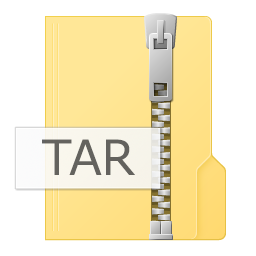
<style>
.page{position:relative;width:256px;height:256px;background:#ffffff}
.page>*{position:absolute;margin:0}
.t1{font:48px "MeiryoUI";color:#64635e}
</style>
<div class="page">
<p class="t1" style="left:42px;top:139px;width:93px;height:36px">TAR</p>
</div>
